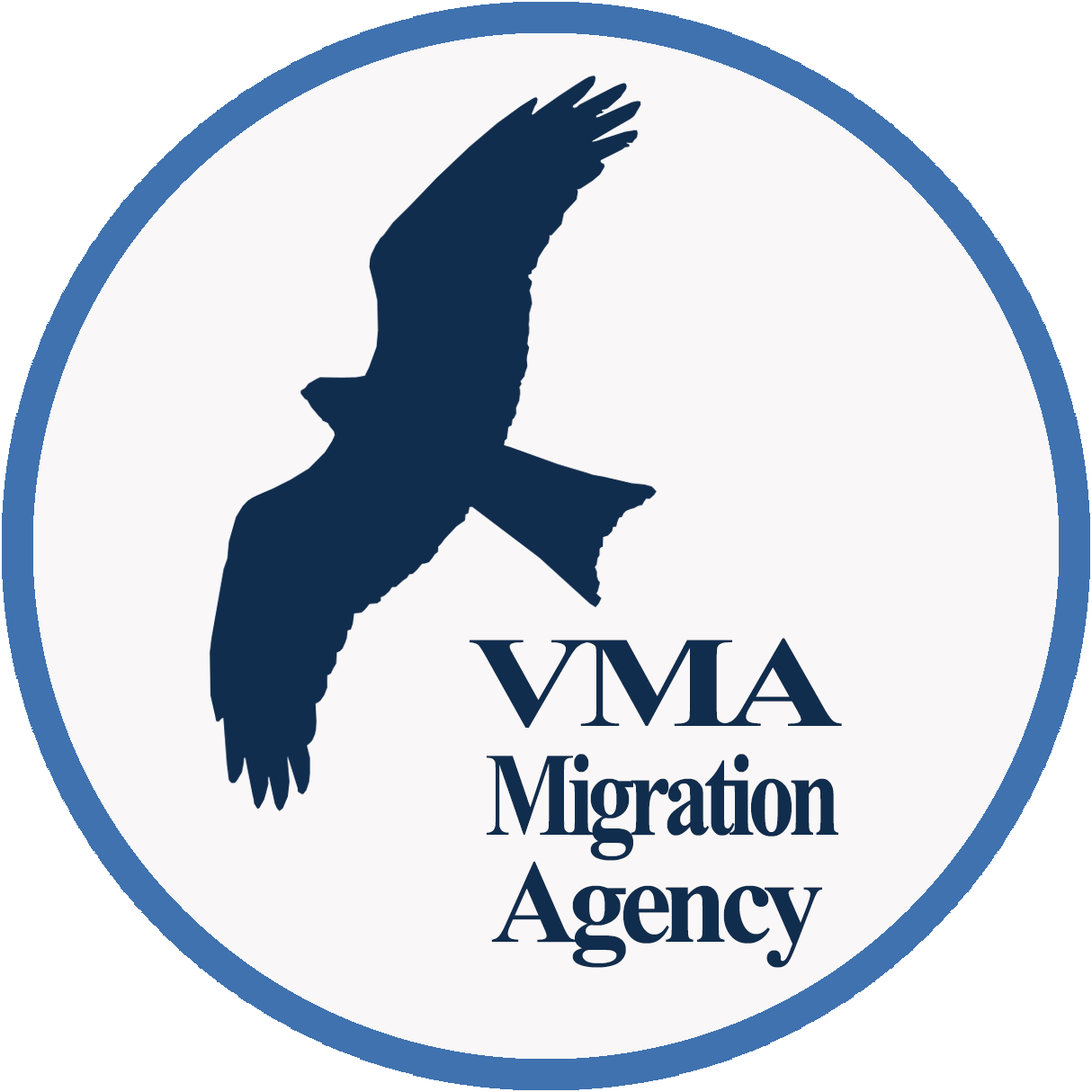
<style>
.page{position:relative;width:1092px;height:1092px;background:#f9f7f7}
.page>*{position:absolute;margin:0}
.t1{font:129.7px "TimesNewRomanPS-BoldMT";letter-spacing:-0.075em;color:#112d4e;scale:1.29 1}
.t2{font:118.9px "TimesNewRomanPS-BoldMT";letter-spacing:-0.075em;color:#112d4e;scale:0.8 1}
.t3{font:118.9px "TimesNewRomanPS-BoldMT";letter-spacing:-0.075em;color:#112d4e}
</style>
<div class="page">
<p class="t1" style="left:470px;top:638px;width:372px;height:90px">VMA</p>
<p class="t2" style="left:487px;top:754px;width:351px;height:107px">Migration</p>
<p class="t3" style="left:491px;top:861px;width:331px;height:107px">Agency</p>
</div>
